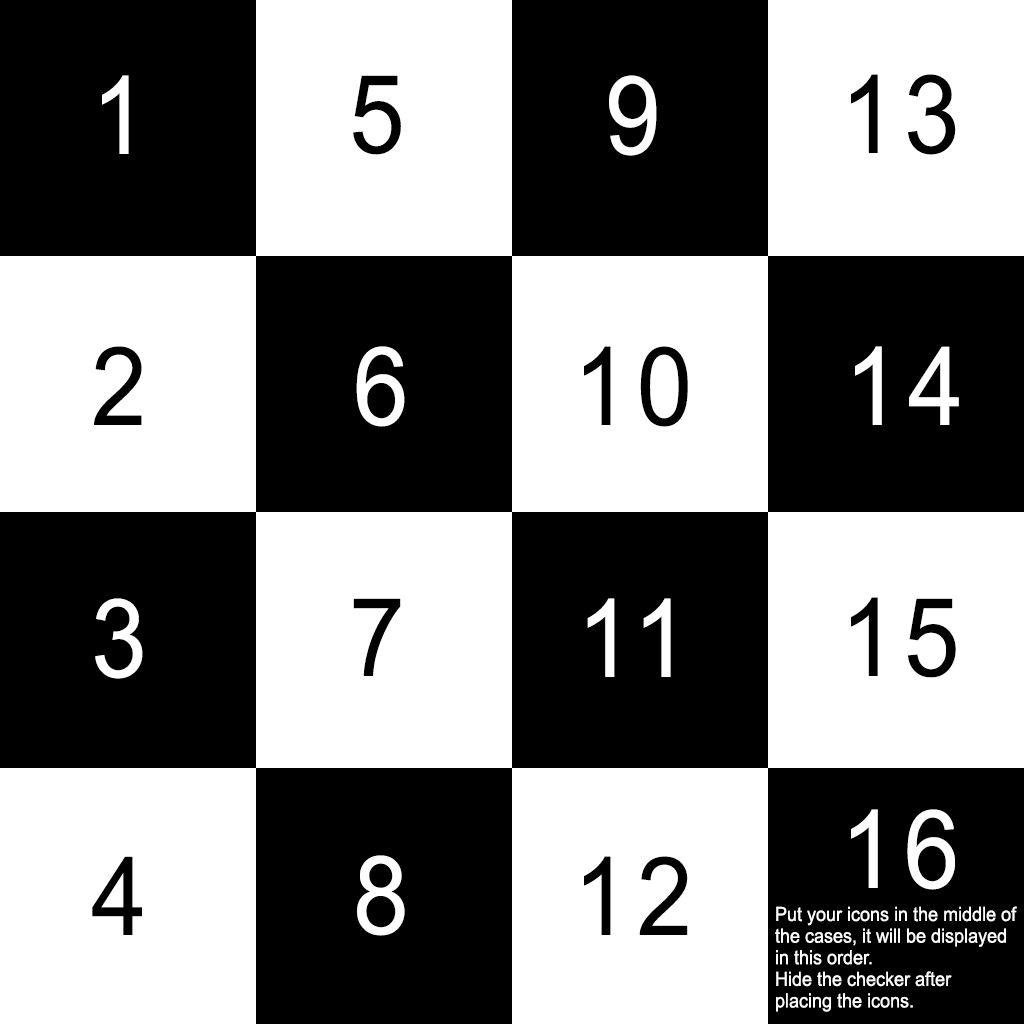
<style>
.page{position:relative;width:1024px;height:1024px;background:#ffffff}
.page>*{position:absolute;margin:0}
.t1{font:109px "ArialMT";letter-spacing:0.08em;color:#ffffff;scale:0.92 1}
.t2{font:109px "ArialMT";letter-spacing:0.08em;color:#000000;scale:0.92 1}
.t3{font:19.6px "ArialMT";color:#ffffff;scale:0.92 1}
</style>
<div class="page">
<p class="t1" style="left:102px;top:75px;width:27px;height:79px">1</p>
<p class="t2" style="left:353px;top:75px;width:48px;height:80px">5</p>
<p class="t1" style="left:609px;top:75px;width:48px;height:81px">9</p>
<p class="t2" style="left:851px;top:74px;width:105px;height:81px">13</p>
<p class="t2" style="left:94px;top:346px;width:48px;height:79px">2</p>
<p class="t1" style="left:356px;top:346px;width:49px;height:81px">6</p>
<p class="t2" style="left:584px;top:346px;width:104px;height:81px">10</p>
<p class="t1" style="left:855px;top:346px;width:104px;height:79px">14</p>
<p class="t1" style="left:95px;top:598px;width:48px;height:81px">3</p>
<p class="t2" style="left:353px;top:598px;width:48px;height:78px">7</p>
<p class="t1" style="left:587px;top:598px;width:84px;height:79px">11</p>
<p class="t2" style="left:851px;top:597px;width:105px;height:81px">15</p>
<p class="t1" style="left:851px;top:809px;width:104px;height:81px">16</p>
<p class="t2" style="left:92px;top:856px;width:50px;height:79px">4</p>
<p class="t1" style="left:357px;top:855px;width:48px;height:81px">8</p>
<p class="t2" style="left:584px;top:856px;width:104px;height:79px">12</p>
<p class="t3" style="left:775px;top:906px;width:242px;height:106px">Put your icons in the middle of<br>the cases, it will be displayed <br>in this order.<br>Hide the checker after <br>placing the icons.</p>
</div>
